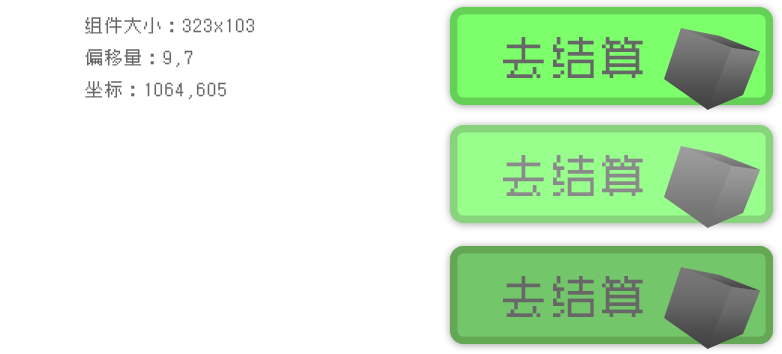
<style>
.page{position:relative;width:782px;height:354px;background:#ffffff}
.page>*{position:absolute;margin:0}
.t1{font:17.7px/31.8px "Zpix";color:#676767}
.t2{font:44.8px "Zpix";color:#676767}
.t3{font:44.8px "Zpix";color:#8a8a8a}
</style>
<div class="page">
<p class="t1" style="left:85px;top:17px;width:170px;height:83px">组件大小：323x103<br>偏移量：9,7<br>坐标：1064,605</p>
<p class="t2" style="left:503px;top:37px;width:140px;height:41px">去结算</p>
<p class="t3" style="left:503px;top:155px;width:140px;height:41px">去结算</p>
<p class="t2" style="left:503px;top:276px;width:140px;height:41px">去结算</p>
</div>
